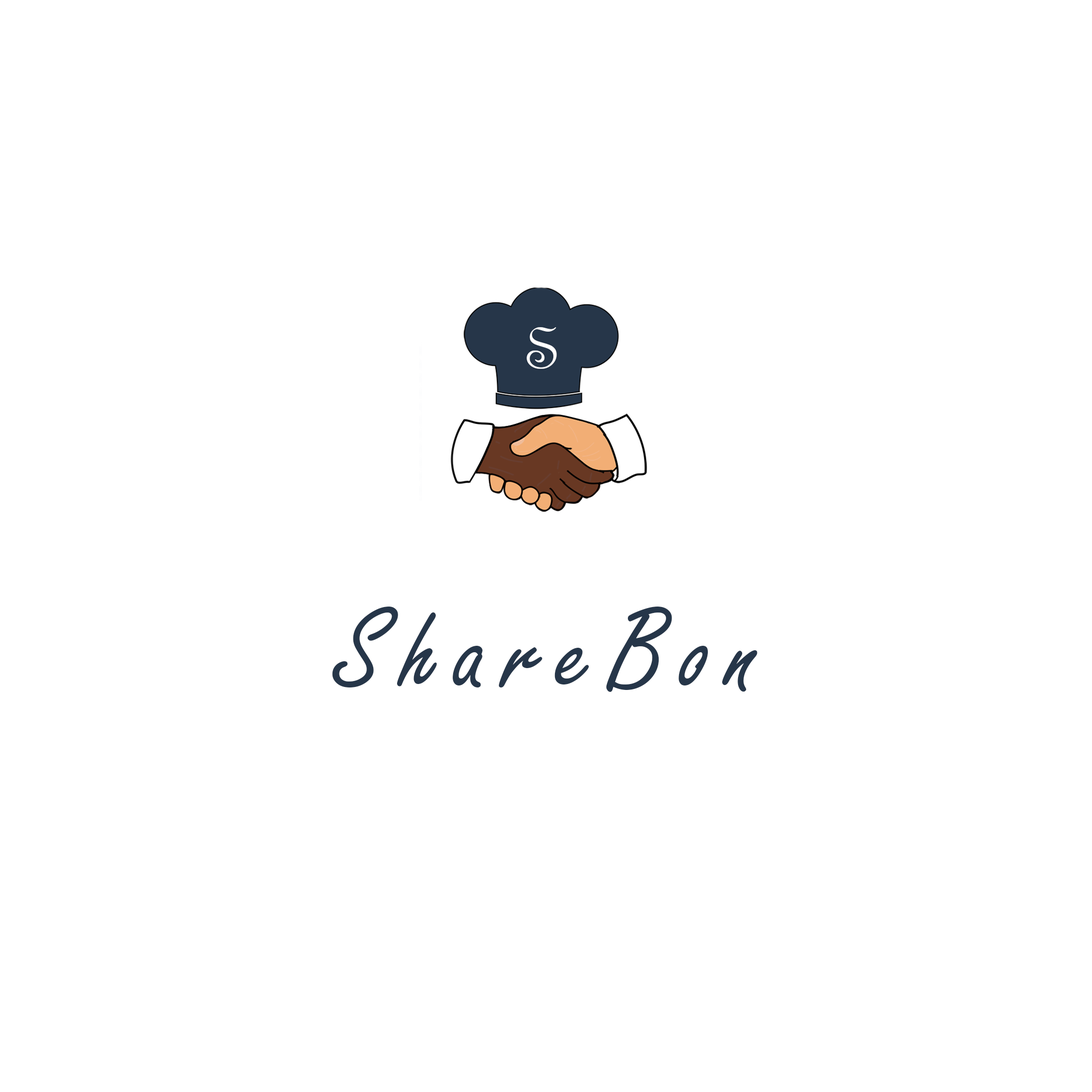
<style>
.page{position:relative;width:1092px;height:1092px;background:#ffffff}
.page>*{position:absolute;margin:0}
.t1{font:124.1px "FreestyleScript-Regular";letter-spacing:0.135em;color:#263649}
</style>
<div class="page">
<p class="t1" style="left:332px;top:607px;width:425px;height:85px">ShareBon</p>
</div>
